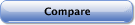
<style>
.page{position:relative;width:135px;height:25px}
.page>*{position:absolute;margin:0}
.t1{font:10px "LucidaGrande-Bold";color:#000000}
</style>
<div class="page">
<p class="t1" style="left:44px;top:7px;width:46px;height:10px">Compare</p>
</div>
